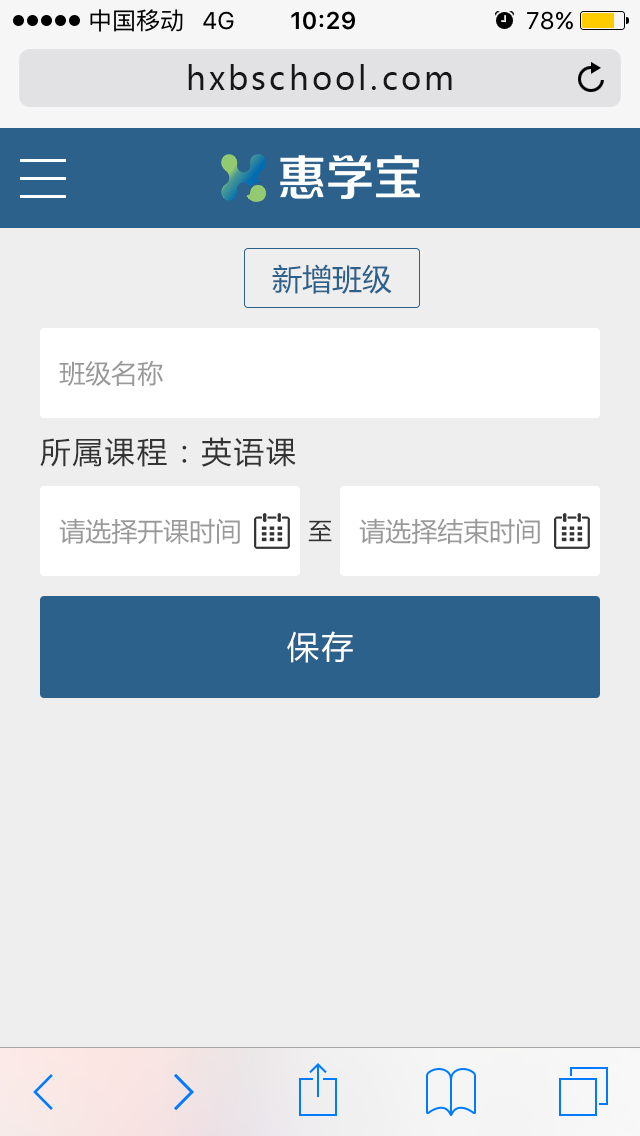
<style>
.page{position:relative;width:640px;height:1136px;background:#eeeeee}
.page>*{position:absolute;margin:0}
.t1{font:32px "MicrosoftYaHei";letter-spacing:0.1em;color:#171717}
.t2{font:30px "MicrosoftYaHei";color:#2c618b}
.t3{font:26px "MicrosoftYaHei";color:#999999}
.t4{font:30px "MicrosoftYaHei";letter-spacing:0.075em;color:#333333}
.t5{font:24px "MicrosoftYaHei";letter-spacing:0.075em;color:#333333}
.t6{font:32px "MicrosoftYaHei";letter-spacing:0.075em;color:#ffffff}
</style>
<div class="page">
<p class="t1" style="left:188px;top:64px;width:264px;height:26px">hxbschool.com</p>
<p class="t2" style="left:272px;top:264px;width:120px;height:30px">新增班级</p>
<p class="t3" style="left:59px;top:360px;width:104px;height:26px">班级名称</p>
<p class="t4" style="left:40px;top:437px;width:256px;height:30px">所属课程：英语课</p>
<p class="t3" style="left:59px;top:518px;width:181px;height:26px">请选择开课时间</p>
<p class="t5" style="left:308px;top:520px;width:24px;height:22px">至</p>
<p class="t3" style="left:359px;top:518px;width:181px;height:26px">请选择结束时间</p>
<p class="t6" style="left:287px;top:631px;width:66px;height:32px">保存</p>
</div>
